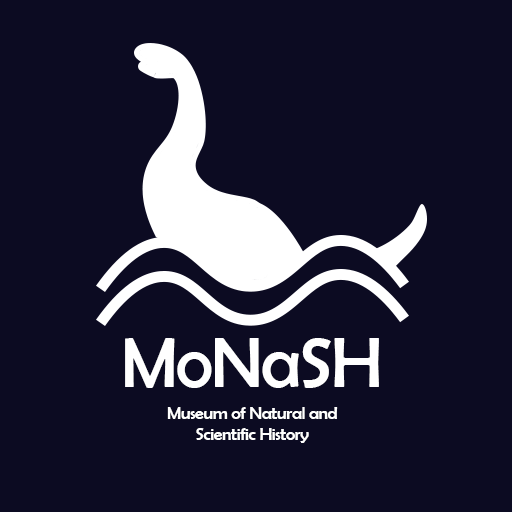
<style>
.page{position:relative;width:512px;height:512px;background:#0c0b22}
.page>*{position:absolute;margin:0}
.t1{font:72px "BerlinSansFB-Reg";letter-spacing:-0.025em;color:#ffffff}
.t2{font:18px "BerlinSansFB-Reg";letter-spacing:-0.025em;color:#ffffff}
</style>
<div class="page">
<p class="t1" style="left:125px;top:338px;width:254px;height:50px">MoNaSH</p>
<p class="t2" style="left:167px;top:407px;width:171px;height:36px;text-align:center">Museum of Natural and <br>Scientific History</p>
</div>
